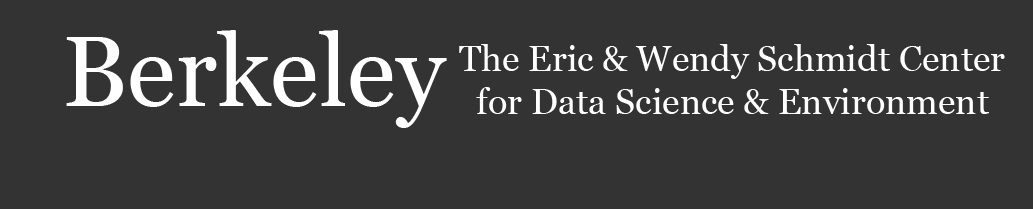
<style>
.page{position:relative;width:1033px;height:209px;background:#333333}
.page>*{position:absolute;margin:0}
.t1{font:100px "Georgia";color:#ffffff}
.t2{font:36px "Georgia";color:#ffffff}
</style>
<div class="page">
<p class="t1" style="left:66px;top:30px;width:381px;height:98px">Berkeley</p>
<p class="t2" style="left:459px;top:44px;width:546px;height:70px">The Eric &amp; Wendy Schmidt Center<br>  for Data Science &amp; Environment</p>
</div>
